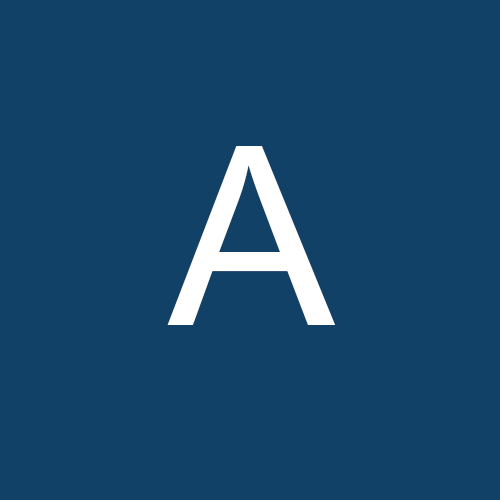
<style>
.page{position:relative;width:500px;height:500px;background:#114167}
.page>*{position:absolute;margin:0}
.t1{font:250px "ArialMT";color:#ffffff}
</style>
<div class="page">
<p class="t1" style="left:167px;top:146px;width:169px;height:179px">A</p>
</div>
